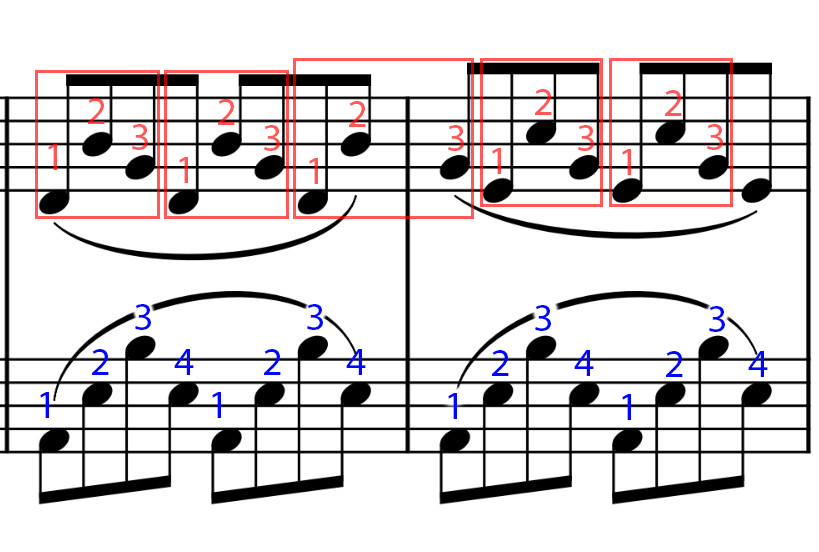
<style>
.page{position:relative;width:819px;height:552px;background:#ffffff}
.page>*{position:absolute;margin:0}
.t1{font:40px "MyriadPro-Regular";color:#ff5858}
.t2{font:40px "MyriadPro-Regular"}
.t3{font:40px "MyriadPro-Regular";color:#0006ff}
</style>
<div class="page">
<p class="t1" style="left:535px;top:89px;width:17px;height:26px">2</p>
<p class="t2" style="left:88px;top:98px;width:17px;height:26px">2</p>
<p class="t1" style="left:218px;top:99px;width:17px;height:26px">2</p>
<p class="t1" style="left:349px;top:101px;width:17px;height:26px">2</p>
<p class="t1" style="left:665px;top:90px;width:17px;height:26px">2</p>
<p class="t1" style="left:132px;top:124px;width:16px;height:26px">3</p>
<p class="t1" style="left:264px;top:125px;width:16px;height:26px">3</p>
<p class="t1" style="left:448px;top:125px;width:16px;height:26px">3</p>
<p class="t1" style="left:578px;top:125px;width:16px;height:26px">3</p>
<p class="t1" style="left:707px;top:124px;width:16px;height:26px">3</p>
<p class="t1" style="left:48px;top:144px;width:9px;height:26px">1</p>
<p class="t1" style="left:492px;top:148px;width:9px;height:26px">1</p>
<p class="t1" style="left:622px;top:149px;width:9px;height:26px">1</p>
<p class="t1" style="left:179px;top:157px;width:9px;height:26px">1</p>
<p class="t1" style="left:309px;top:158px;width:9px;height:26px">1</p>
<p class="t3" style="left:135px;top:304px;width:16px;height:26px">3</p>
<p class="t3" style="left:307px;top:304px;width:16px;height:26px">3</p>
<p class="t3" style="left:535px;top:305px;width:16px;height:26px">3</p>
<p class="t3" style="left:709px;top:306px;width:16px;height:26px">3</p>
<p class="t3" style="left:92px;top:349px;width:17px;height:26px">2</p>
<p class="t3" style="left:174px;top:349px;width:20px;height:26px">4</p>
<p class="t3" style="left:264px;top:349px;width:17px;height:26px">2</p>
<p class="t3" style="left:346px;top:349px;width:20px;height:26px">4</p>
<p class="t3" style="left:492px;top:350px;width:17px;height:26px">2</p>
<p class="t3" style="left:574px;top:350px;width:20px;height:26px">4</p>
<p class="t3" style="left:666px;top:351px;width:17px;height:26px">2</p>
<p class="t3" style="left:748px;top:351px;width:20px;height:26px">4</p>
<p class="t3" style="left:40px;top:392px;width:9px;height:26px">1</p>
<p class="t3" style="left:212px;top:392px;width:9px;height:26px">1</p>
<p class="t3" style="left:448px;top:393px;width:9px;height:26px">1</p>
<p class="t3" style="left:622px;top:394px;width:9px;height:26px">1</p>
</div>
